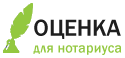
<style>
.page{position:relative;width:125px;height:58px;background:#ffffff}
.page>*{position:absolute;margin:0}
.t1{font:14px "FranklinGothic-Medium";letter-spacing:0.01em;color:#93c83f}
.t2{font:24px "FranklinGothic-Medium";letter-spacing:-0.005em;color:#1e1e1e}
</style>
<div class="page">
<p class="t1" style="left:33px;top:19px;width:89px;height:36px"><span class="t2">ОЦЕНКА<br></span>для нотариуса</p>
</div>
